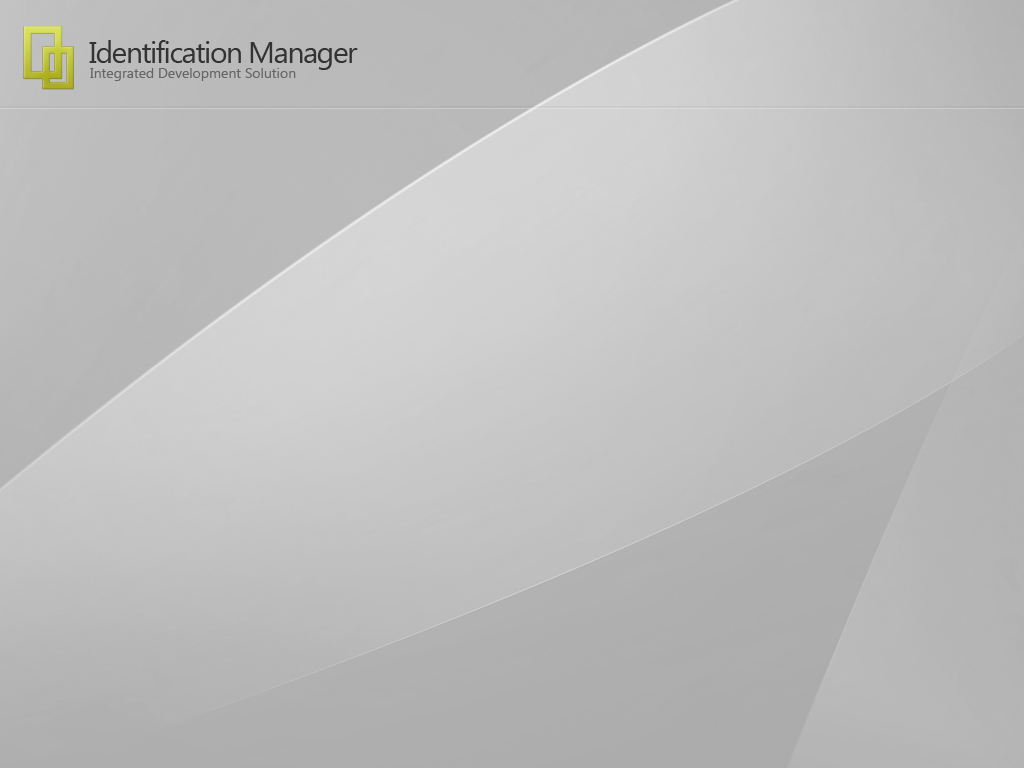
<style>
.page{position:relative;width:1024px;height:768px}
.page>*{position:absolute;margin:0}
.t1{font:30px "SegoeUI";letter-spacing:-0.05em;color:#333333}
.t2{font:14px "SegoeUI";color:#666666}
</style>
<div class="page">
<p class="t1" style="left:89px;top:40px;width:269px;height:30px">Identification Manager</p>
<p class="t2" style="left:90px;top:68px;width:206px;height:13px">Integrated Development Solution</p>
</div>
